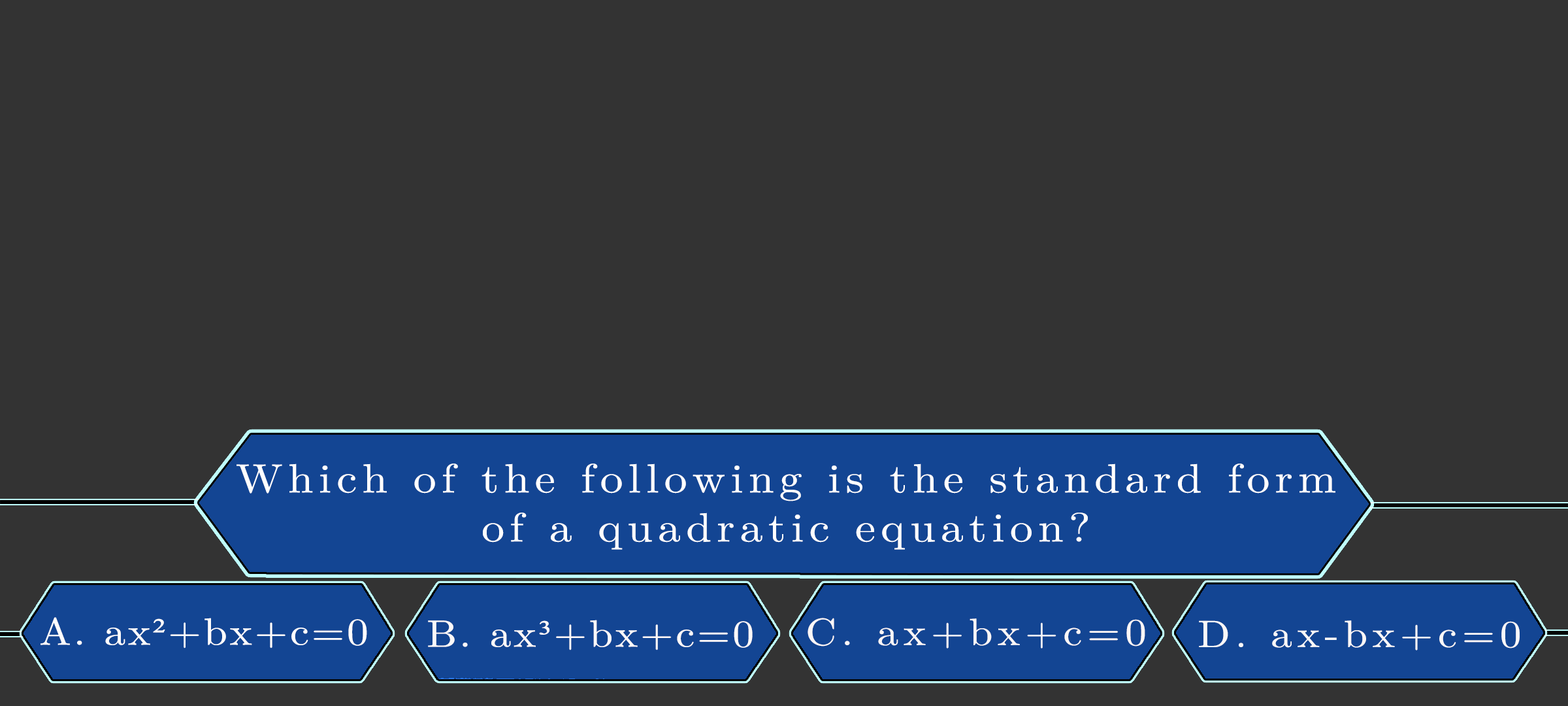
<style>
.page{position:relative;width:1568px;height:706px;background:#333333}
.page>*{position:absolute;margin:0}
.t1{font:40.8px/49px "LatinModernMath-Regular";letter-spacing:0.115em;color:#ffffff;scale:1.12 1}
.t2{font:38.1px "LatinModernMath-Regular";letter-spacing:0.055em;color:#fffefe;scale:1.12 1}
.t3{font:38.1px "LatinModernMath-Regular";letter-spacing:0.055em;color:#fffefe;text-transform:uppercase;scale:1.12 1}
.t4{font:38.1px "TimesNewRomanPSMT";letter-spacing:0.055em;color:#fffefe;scale:1.12 1}
.t5{font:38.1px "LatinModernMath-Regular";letter-spacing:0.115em;color:#fcf7f7;scale:1.12 1}
.t6{font:38.1px "LatinModernMath-Regular";letter-spacing:0.115em;color:#fcf7f7;text-transform:uppercase;scale:1.12 1}
.t7{font:38.1px "LatinModernMath-Regular";letter-spacing:0.055em;color:#fdf9f9;scale:1.12 1}
.t8{font:38.1px "LatinModernMath-Regular";letter-spacing:0.055em;color:#fdf9f9;text-transform:uppercase;scale:1.12 1}
.t9{font:38.1px "TimesNewRomanPSMT";letter-spacing:0.055em;color:#fdf9f9;scale:1.12 1}
.t10{font:38.1px "LatinModernMath-Regular";letter-spacing:0.115em;color:#fbf8f8;scale:1.12 1}
.t11{font:38.1px "LatinModernMath-Regular";letter-spacing:0.115em;color:#fbf8f8;text-transform:uppercase;scale:1.12 1}
</style>
<div class="page">
<p class="t1" style="left:237px;top:463px;width:1098px;height:86px;text-align:center">Which of the following is the standard form<br>of a quadratic equation?</p>
<p class="t2" style="left:41px;top:617px;width:326px;height:31px"><span class="t3">a. </span>ax<span class="t4">²</span>+bx+c=0</p>
<p class="t5" style="left:808px;top:617px;width:337px;height:31px"><span class="t6">c. </span>ax+bx+c=0</p>
<p class="t7" style="left:428px;top:619px;width:325px;height:31px"><span class="t8">b. </span>ax<span class="t9">³</span>+bx+c=0</p>
<p class="t10" style="left:1199px;top:620px;width:321px;height:30px"><span class="t11">d. </span>ax-bx+c=0</p>
</div>
